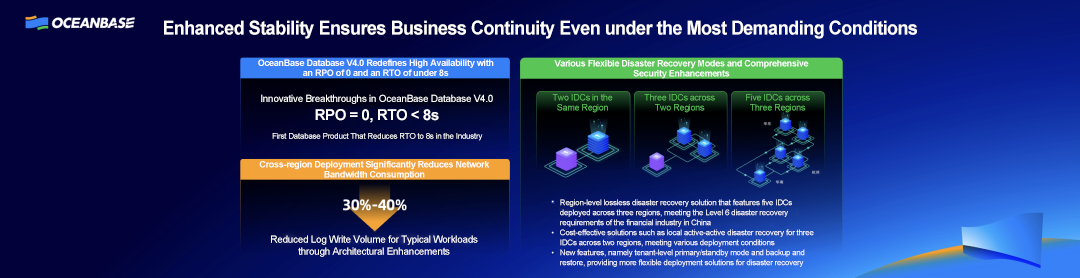
<style>
.page{position:relative;width:1080px;height:278px;background:#020139}
.page>*{position:absolute;margin:0}
.t1{font:19px "Arial-BoldMT";letter-spacing:-0.03em;color:#ffffff;scale:0.95 1}
.t2{font:9px/10px "Arial-BoldMT";letter-spacing:-0.03em;color:#ffffff}
.t3{font:10px "ArialMT";letter-spacing:-0.03em;color:#ffffff}
.t4{font:9px/10px "ArialMT";letter-spacing:-0.03em;color:#5bc558}
.t5{font:15px "Arial-BoldMT";letter-spacing:-0.03em;color:#ffffff}
.t6{font:8px "ArialMT";letter-spacing:-0.03em;color:#ffffff}
.t7{font:8px/10px "ArialMT";letter-spacing:-0.03em;color:#ffffff}
.t8{font:10px/12px "ArialMT";letter-spacing:-0.03em;color:#ffffff}
</style>
<div class="page">
<p class="t1" style="left:164px;top:20px;width:753px;height:19px">Enhanced Stability Ensures Business Continuity Even under the Most Demanding Conditions</p>
<p class="t2" style="left:258px;top:59px;width:236px;height:17px;text-align:center">OceanBase Database V4.0 Redefines High Availability with an RPO of 0 and an RTO of under 8s</p>
<p class="t2" style="left:554px;top:60px;width:255px;height:19px;text-align:center">Various Flexible Disaster Recovery Modes and Comprehensive Security Enhancements</p>
<p class="t3" style="left:261px;top:94px;width:232px;height:10px">Innovative Breakthroughs in OceanBase Database V4.0</p>
<p class="t4" style="left:552px;top:94px;width:61px;height:19px;text-align:center">Two IDCs in the Same Region</p>
<p class="t4" style="left:644px;top:94px;width:71px;height:19px;text-align:center">Three IDCs across Two Regions</p>
<p class="t4" style="left:746px;top:94px;width:64px;height:19px;text-align:center">Five IDCs across Three Regions</p>
<p class="t5" style="left:315px;top:109px;width:124px;height:14px">RPO = 0, RTO &lt; 8s</p>
<p class="t6" style="left:272px;top:133px;width:211px;height:8px">First Database Product That Reduces RTO to 8s in the Industry</p>
<p class="t2" style="left:259px;top:161px;width:230px;height:19px;text-align:center">Cross-region Deployment Significantly Reduces Network Bandwidth Consumption</p>
<p class="t7" style="left:560px;top:199px;width:254px;height:68px">Region-level lossless disaster recovery solution that features five IDCs deployed across three regions, meeting the Level 6 disaster recovery requirements of the financial industry in China<br>Cost-effective solutions such as local active-active disaster recovery for three IDCs across two regions, meeting various deployment conditions<br>New features, namely tenant-level primary/standby mode and backup and restore, providing more flexible deployment solutions for disaster recovery</p>
<p class="t8" style="left:271px;top:235px;width:207px;height:22px;text-align:center">Reduced Log Write Volume for Typical Workloads through Architectural Enhancements</p>
</div>
